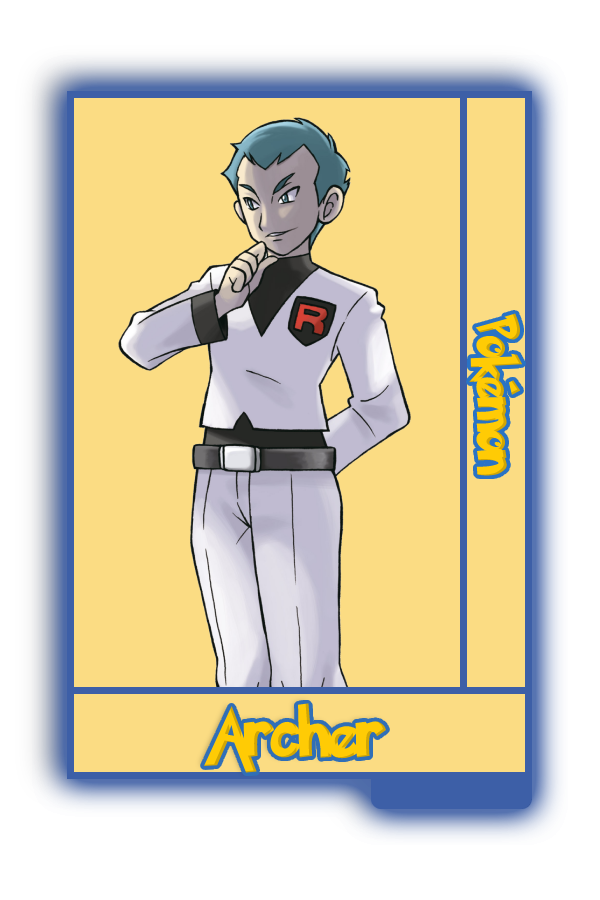
<style>
.page{position:relative;width:600px;height:900px;background:#fbdc83}
.page>*{position:absolute;margin:0}
.t1{font:48.8px "PokemonSolidNormal";color:#ffcb05;scale:0.8 1}
.t2{font:56.6px "PokemonSolidNormal";color:#ffcb05;scale:0.92 1}
</style>
<div class="page">
<p class="t1" style="left:469px;top:313px;width:54px;height:163px;rotate:90deg">Pokémon</p>
<p class="t2" style="left:203px;top:703px;width:183px;height:70px">Archer</p>
</div>
